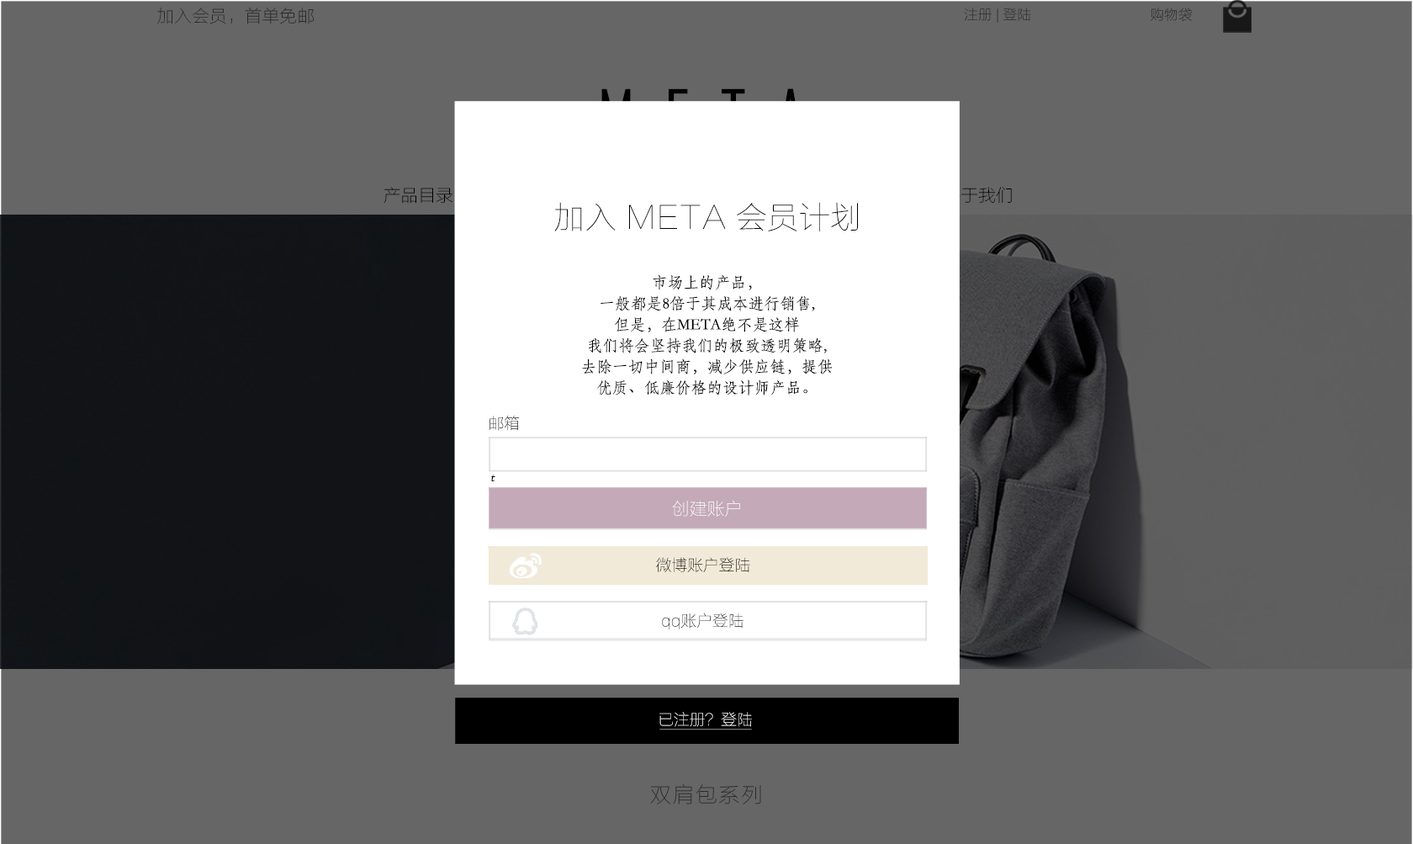
<style>
.page{position:relative;width:1413px;height:844px;background:#666666}
.page>*{position:absolute;margin:0}
.t1{font:17.5px "FZLTCXHJW--GB1-0";color:#292929}
.t2{font:14px "FZLTCXHJW--GB1-0";color:#292929}
.t3{font:14.2px "ArialMT";color:#292929}
.t4{font:31.5px "FZLTCXHJW--GB1-0";color:#000000}
.t5{font:15.8px/21px "STFangsong";color:#000000}
.t6{font:15.8px "FZLTCXHJW--GB1-0";color:#232323}
.t7{font:14px "STFangsong";letter-spacing:0.2em;color:#080808;font-style:italic}
.t8{font:17.5px "FZLTCXHJW--GB1-0";color:#ffffff}
.t9{font:15.8px "FZLTCXHJW--GB1-0";color:#000000}
.t10{font:15.8px "FZLTCXHJW--GB1-0";color:#ffffff}
.t11{font:21.4px "FZLTCXHJW--GB1-0";letter-spacing:0.075em;color:#292929}
</style>
<div class="page">
<p class="t1" style="left:157px;top:8px;width:158px;height:16px">加入会员，首单免邮</p>
<p class="t2" style="left:964px;top:8px;width:228px;height:15px"><span class="t3"> </span>注册 | 登陆                           购物袋</p>
<p class="t4" style="left:554px;top:202px;width:304px;height:29px">加入 META 会员计划</p>
<p class="t5" style="left:582px;top:274px;width:251px;height:121px;text-align:center">市场上的产品，<br>一般都是8倍于其成本进行销售,<br>但是，在META绝不是这样<br>我们将会坚持我们的极致透明策略,<br>去除一切中间商，减少供应链，提供<br>优质、低廉价格的设计师产品。</p>
<p class="t6" style="left:490px;top:416px;width:30px;height:15px">邮箱</p>
<p class="t7" style="left:491px;top:474px;width:4px;height:7px">t</p>
<p class="t8" style="left:672px;top:500px;width:68px;height:17px">创建zzzzzzzz账户</p>
<p class="t9" style="left:656px;top:557px;width:94px;height:15px">微博账户登陆</p>
<p class="t9" style="left:662px;top:612px;width:82px;height:17px">qq账户登陆</p>
<p class="t10" style="left:660px;top:712px;width:92px;height:15px">已注册？登陆</p>
<p class="t11" style="left:650px;top:784px;width:111px;height:20px">双肩包系列</p>
</div>
